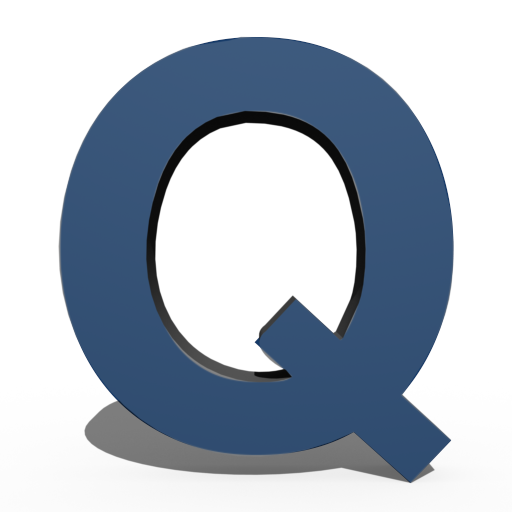
<style>
.page{position:relative;width:512px;height:512px;background:#ffffff}
.page>*{position:absolute;margin:0}
.t1{font:560px "HelveticaNeue-Bold";color:#365276}
</style>
<div class="page">
<p class="t1" style="left:60px;top:37px;width:394px;height:446px">Q</p>
</div>
